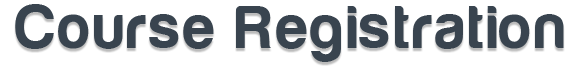
<style>
.page{position:relative;width:581px;height:66px;background:#ffffff}
.page>*{position:absolute;margin:0}
.t1{font:63px "Harabara";letter-spacing:0.06em;color:#39444f}
</style>
<div class="page">
<p class="t1" style="left:15px;top:4px;width:549px;height:58px">Course Registration</p>
</div>
